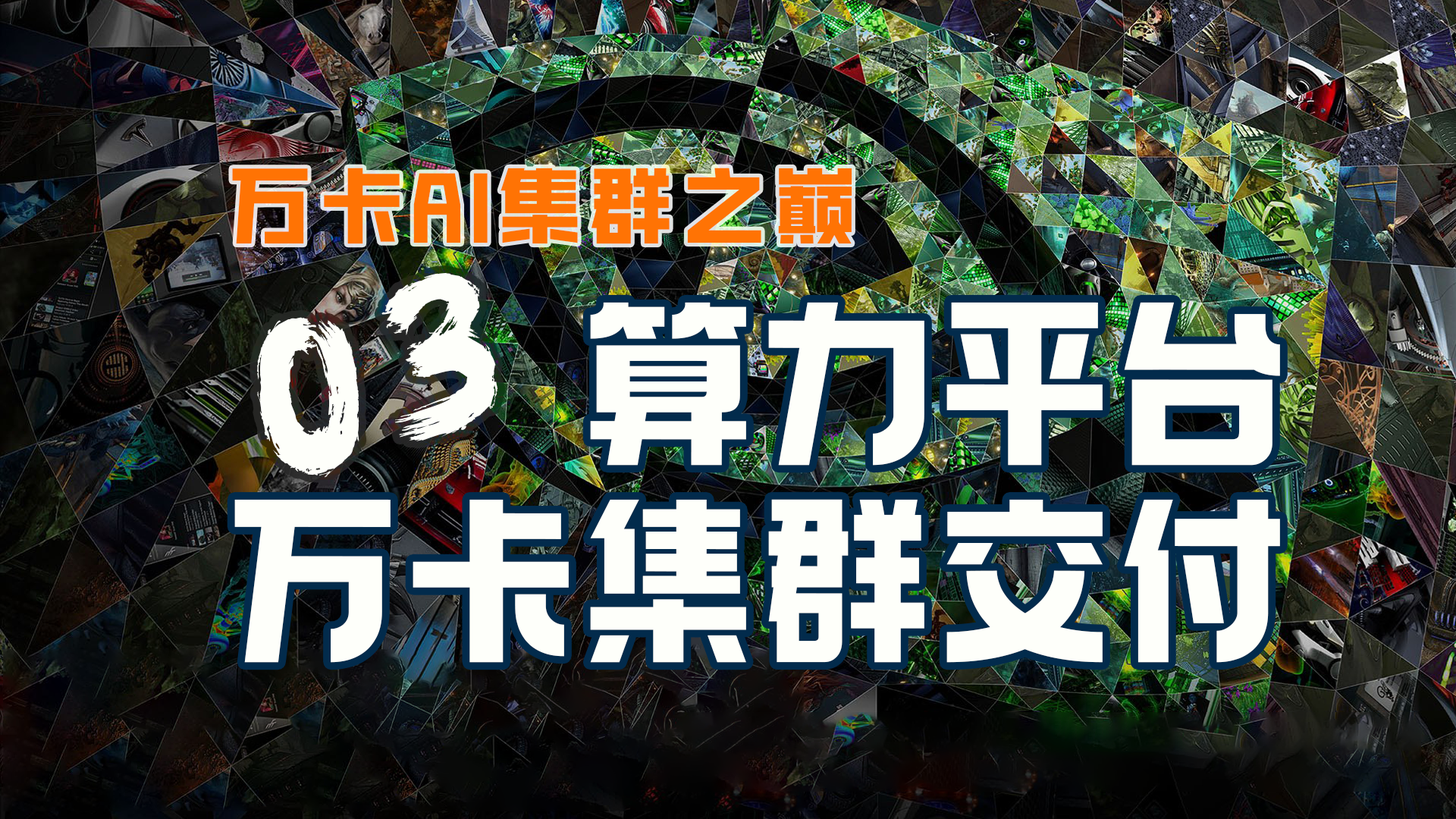
<style>
.page{position:relative;width:1456px;height:819px}
.page>*{position:absolute;margin:0}
.t1{font:83.4px "HGGTZHVF_587.000wght";letter-spacing:0.1em;color:#ff7304}
.t2{font:212.3px "REEJI-CHAO-BeiMingGBT-Flash";color:#fefffa}
.t3{font:182px/197.2px "098-";letter-spacing:0.05em;color:#fefffa}
</style>
<div class="page">
<p class="t1" style="left:232px;top:168px;width:620px;height:76px">万卡AI集群之巅</p>
<p class="t2" style="left:257px;top:272px;width:241px;height:206px;rotate:-17deg">03</p>
<p class="t3" style="left:234px;top:302px;width:1046px;height:361px;text-align:right">算力平台<br>万卡集群交付</p>
</div>
